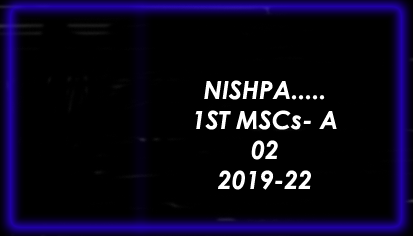
<style>
.page{position:relative;width:413px;height:236px;background:#000000}
.page>*{position:absolute;margin:0}
.t1{font:25px "CenturyGothic-BoldItalic";color:#ffffff}
</style>
<div class="page">
<p class="t1" style="left:195px;top:80px;width:142px;height:110px;text-align:center">NISHPA.....<br>1ST MSCs- A<br>02<br>2019-22</p>
</div>
